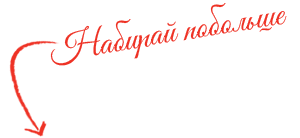
<style>
.page{position:relative;width:300px;height:138px;background:#ffffff}
.page>*{position:absolute;margin:0}
.t1{font:36px "GoodVibesPro";color:#ee3225}
</style>
<div class="page">
<p class="t1" style="left:50px;top:3px;width:237px;height:63px;rotate:-9deg">Набирай побольше</p>
</div>
